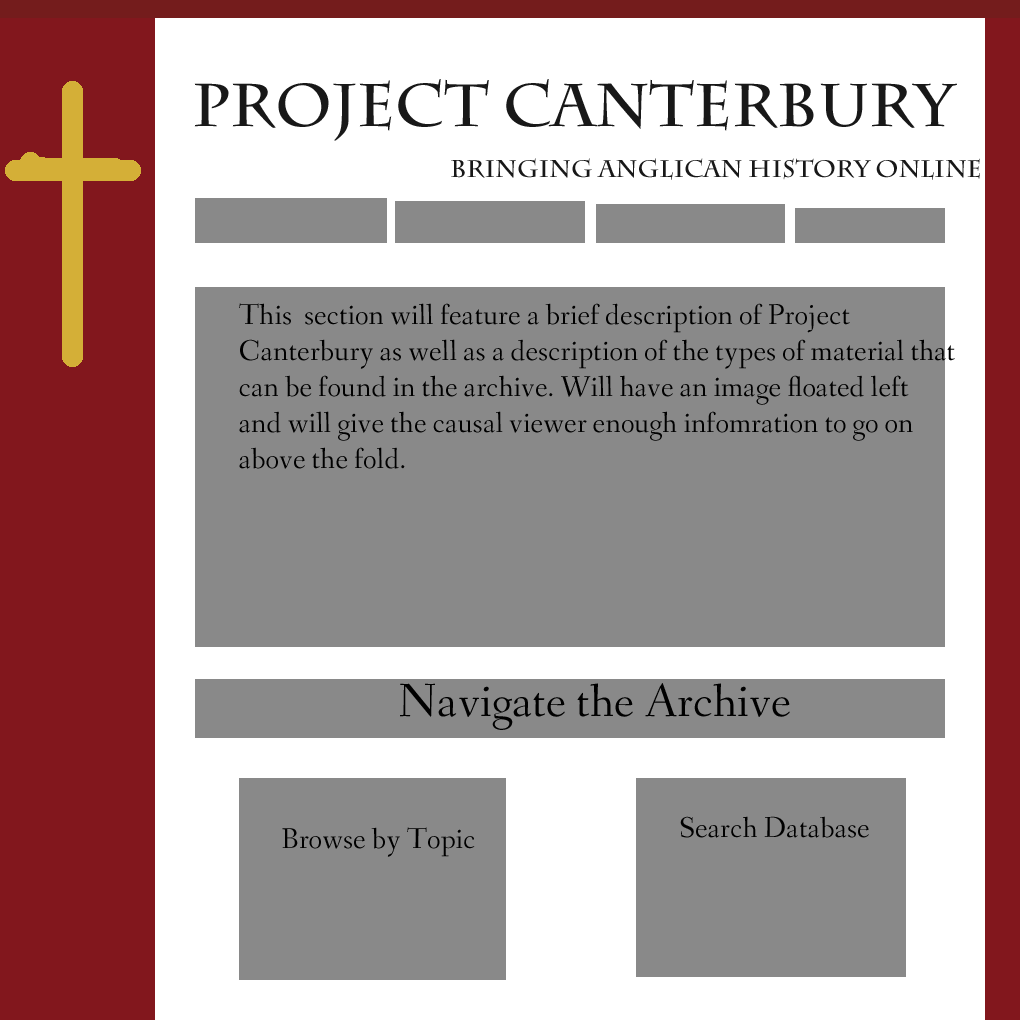
<style>
.page{position:relative;width:1020px;height:1020px;background:#898989}
.page>*{position:absolute;margin:0}
.t1{font:60px "CharlemagneStd-Bold";color:#181818}
.t2{font:24px "CharlemagneStd-Bold";color:#181818}
.t3{font:30px "Fanwood";color:#000000}
.t4{font:48px "Fanwood";color:#000000}
</style>
<div class="page">
<p class="t1" style="left:194px;top:79px;width:763px;height:62px">Project Canterbury</p>
<p class="t2" style="left:451px;top:158px;width:529px;height:22px">Bringing Anglican History Online</p>
<p class="t3" style="left:239px;top:303px;width:716px;height:166px">This  section will feature a brief description of Project<br>Canterbury as well as a description of the types of material that<br>can be found in the archive. Will have an image floated left<br>and will give the causal viewer enough infomration to go on <br>above the fold.</p>
<p class="t4" style="left:400px;top:683px;width:390px;height:47px">Navigate the Archive</p>
<p class="t3" style="left:680px;top:816px;width:189px;height:22px">Search Database</p>
<p class="t3" style="left:282px;top:827px;width:193px;height:30px">Browse by Topic</p>
</div>
